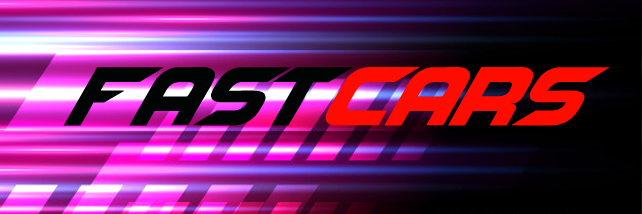
<style>
.page{position:relative;width:642px;height:214px}
.page>*{position:absolute;margin:0}
.t1{font:90px "NFSfont";color:#000504}
.t2{font:90px "NFSfont";color:#ff0c00}
</style>
<div class="page">
<p class="t1" style="left:63px;top:67px;width:546px;height:59px">FAST<span class="t2">CARS</span></p>
</div>
